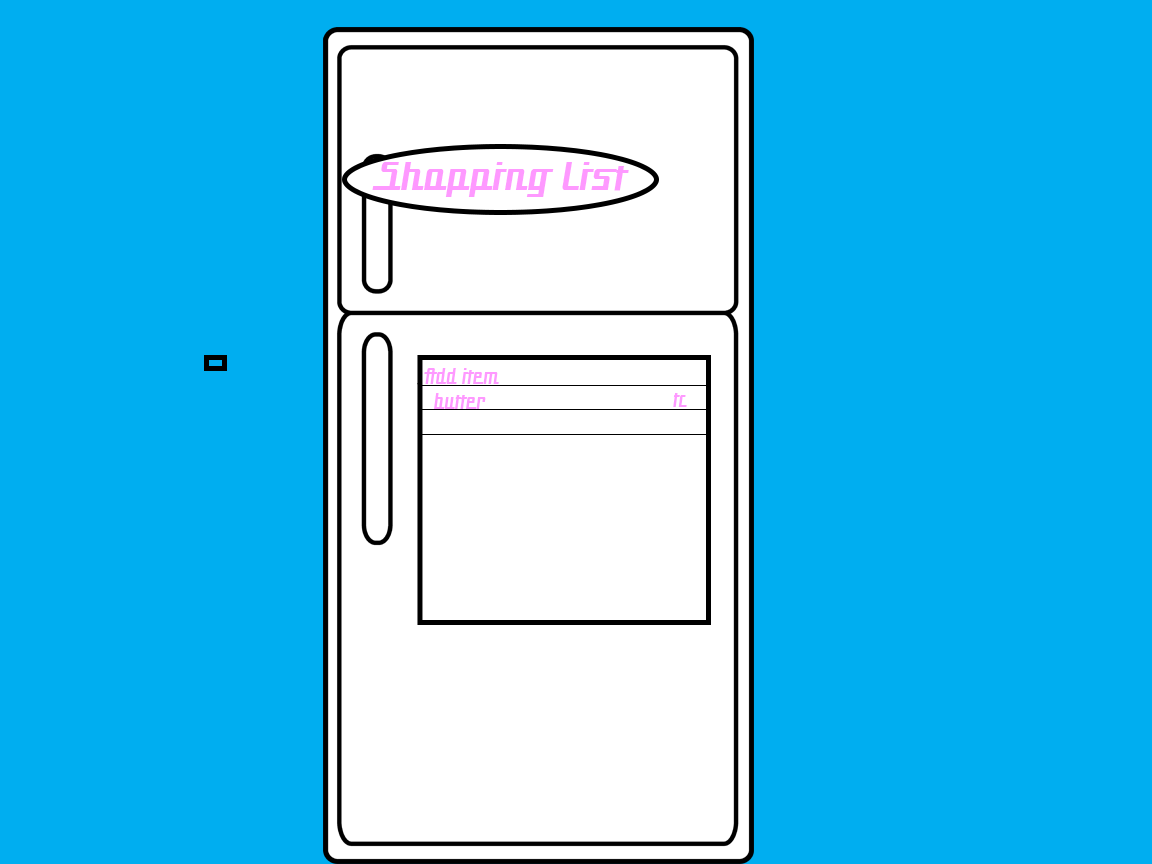
<style>
.page{position:relative;width:1152px;height:864px;background:#00aef0}
.page>*{position:absolute;margin:0}
.t1{font:48px "Hardman";letter-spacing:0.05em;color:#fe99ff;font-style:italic;scale:0.5 1}
.t2{font:27.4px "Hardman";letter-spacing:0.05em;color:#fe99ff;font-style:italic;scale:0.4 1}
</style>
<div class="page">
<p class="t1" style="left:372px;top:162px;width:257px;height:35px">Shopping List</p>
<p class="t2" style="left:424px;top:368px;width:75px;height:16px">Add item</p>
<p class="t2" style="left:434px;top:393px;width:52px;height:16px">butter</p>
<p class="t2" style="left:673px;top:393px;width:14px;height:14px">tc</p>
</div>
